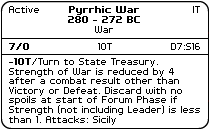
<style>
.page{position:relative;width:210px;height:130px;background:#ffffff}
.page>*{position:absolute;margin:0}
.t1{font:8px "PFTempestaSeven";color:#000000}
.t2{font:8px "PFTempestaSeven-Bold";color:#000000}
.t3{font:8px "PFTempestaSeven";color:#010101}
</style>
<div class="page">
<p class="t1" style="left:9px;top:6px;width:30px;height:7px">Active</p>
<p class="t2" style="left:68px;top:6px;width:72px;height:17px;text-align:center">Pyrrhic War<br>280 - 272 BC</p>
<p class="t1" style="left:193px;top:6px;width:7px;height:7px">IT</p>
<p class="t1" style="left:95px;top:26px;width:18px;height:7px">War</p>
<p class="t2" style="left:9px;top:43px;width:20px;height:7px">7/0</p>
<p class="t1" style="left:98px;top:43px;width:14px;height:7px">10T</p>
<p class="t3" style="left:171px;top:43px;width:29px;height:7px">D7:S16</p>
<p class="t1" style="left:9px;top:58px;width:191px;height:67px"><span class="t2">-10T</span>/Turn to State Treasury.<br>Strength of War is reduced by 4<br>after a combat result other than<br>Victory or Defeat. Discard with no<br>spoils at start of Forum Phase if<br>Strength (not including Leader) is less<br>than 1. Attacks: Sicily</p>
</div>
